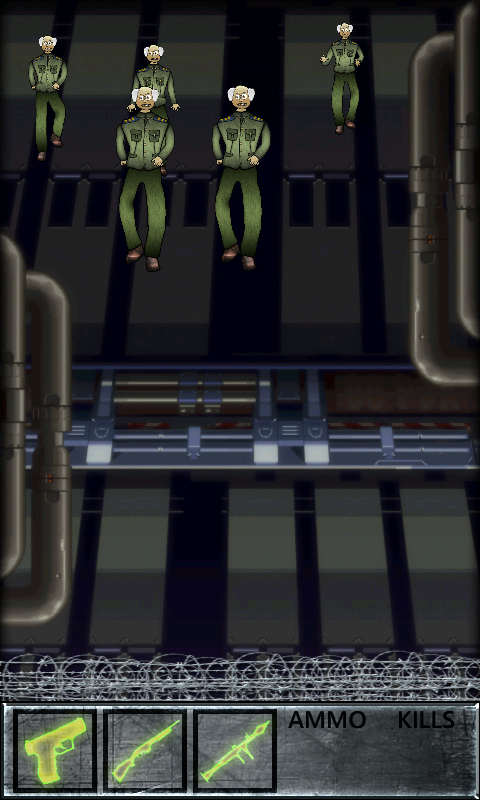
<style>
.page{position:relative;width:480px;height:800px}
.page>*{position:absolute;margin:0}
.t1{font:24px "SegoeWP-Semibold";color:#000000}
</style>
<div class="page">
<p class="t1" style="left:288px;top:711px;width:78px;height:18px">AMMO</p>
<p class="t1" style="left:288px;top:711px;width:78px;height:18px">AMMO</p>
<p class="t1" style="left:399px;top:711px;width:55px;height:18px">KILLS</p>
<p class="t1" style="left:399px;top:711px;width:55px;height:18px">KILLS</p>
</div>
